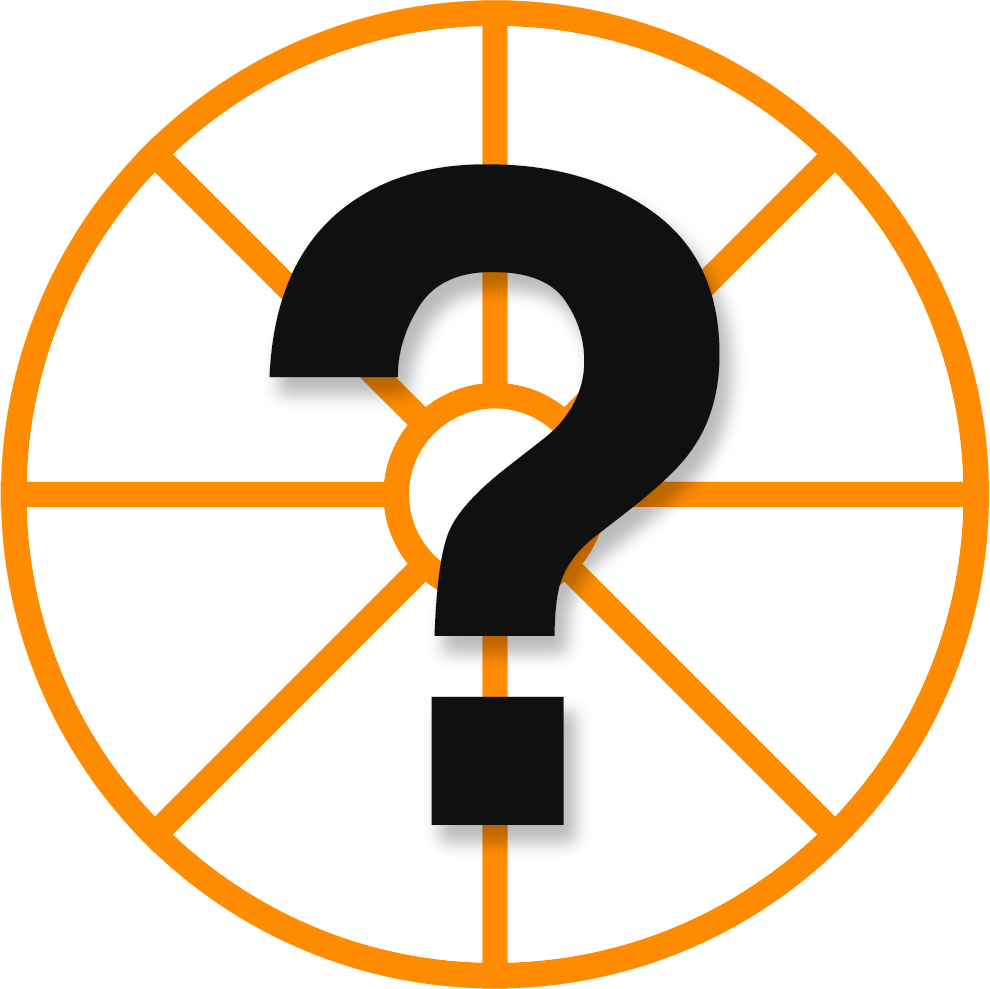
<style>
.page{position:relative;width:990px;height:989px;background:#ffffff}
.page>*{position:absolute;margin:0}
.t1{font:908.6px "Helvetica-Bold";color:#101010}
</style>
<div class="page">
<p class="t1" style="left:269px;top:164px;width:451px;height:661px">?</p>
</div>
